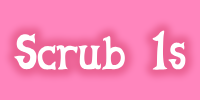
<style>
.page{position:relative;width:200px;height:100px;background:#ff85bd}
.page>*{position:absolute;margin:0}
.t1{font:51.3px "CelestiaReduxAltMedium";color:#ffffff}
</style>
<div class="page">
<p class="t1" style="left:14px;top:30px;width:172px;height:40px">Scrub 1s</p>
</div>
